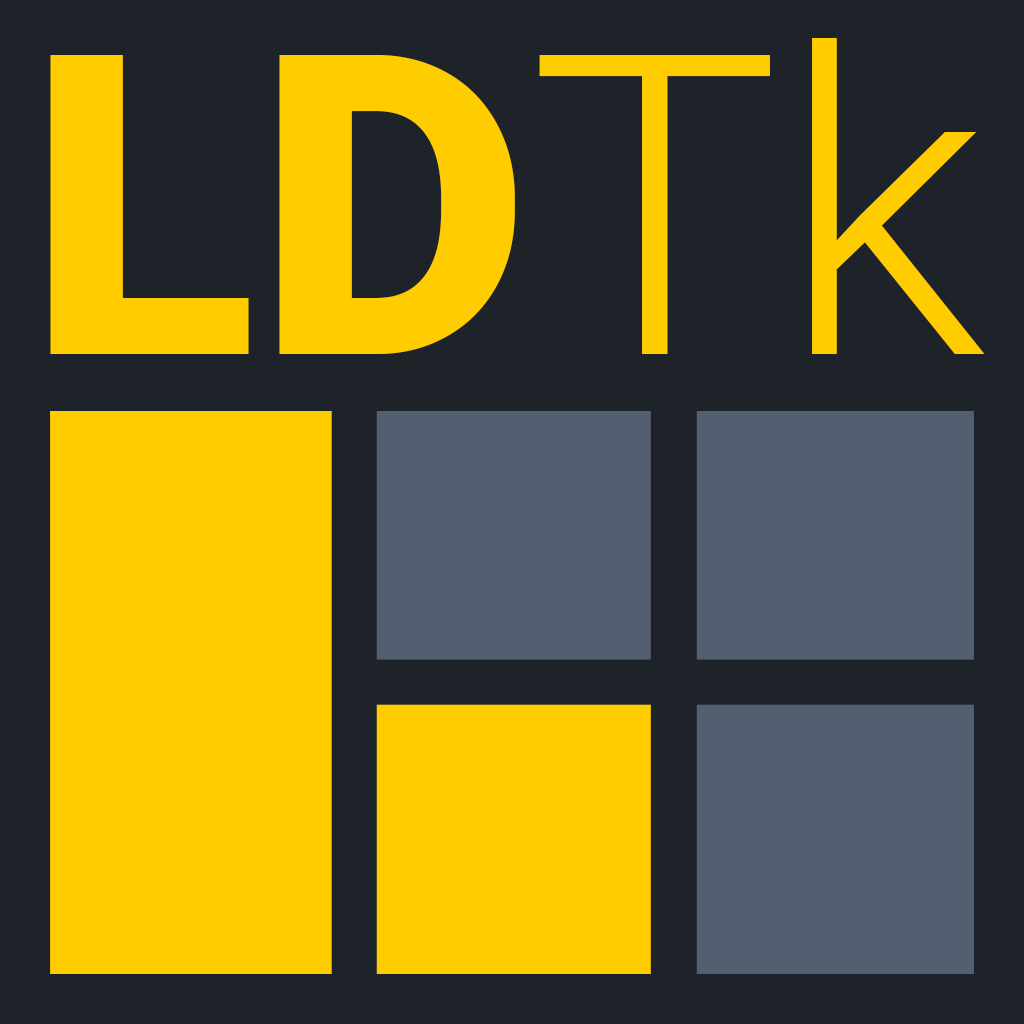
<style>
.page{position:relative;width:1024px;height:1024px;background:#1e2229}
.page>*{position:absolute;margin:0}
.t1{font:420.9px "Roboto-Black";color:#ffcc00}
.t2{font:420.9px "Roboto-Light";color:#ffcc00}
</style>
<div class="page">
<p class="t1" style="left:50px;top:38px;width:935px;height:316px">LD<span class="t2">Tk</span></p>
</div>
